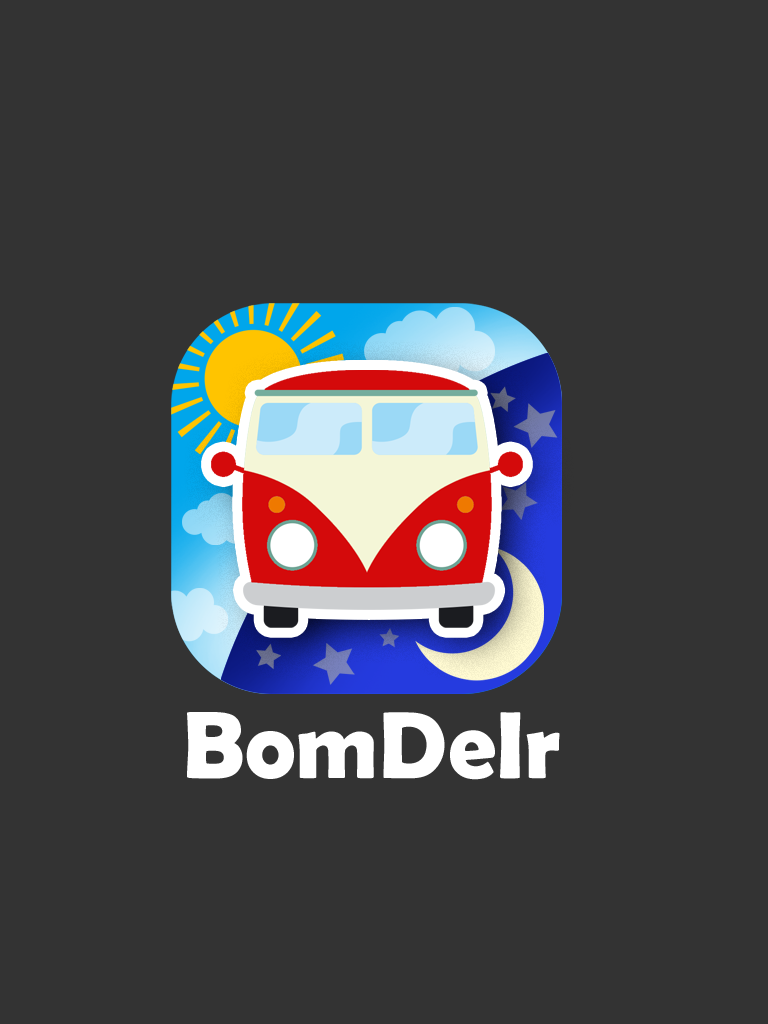
<style>
.page{position:relative;width:768px;height:1024px;background:#333333}
.page>*{position:absolute;margin:0}
.t1{font:96px "BerlinSansFBDemi-Bold";color:#ffffff}
</style>
<div class="page">
<p class="t1" style="left:187px;top:712px;width:373px;height:68px">BomDeIr</p>
</div>
